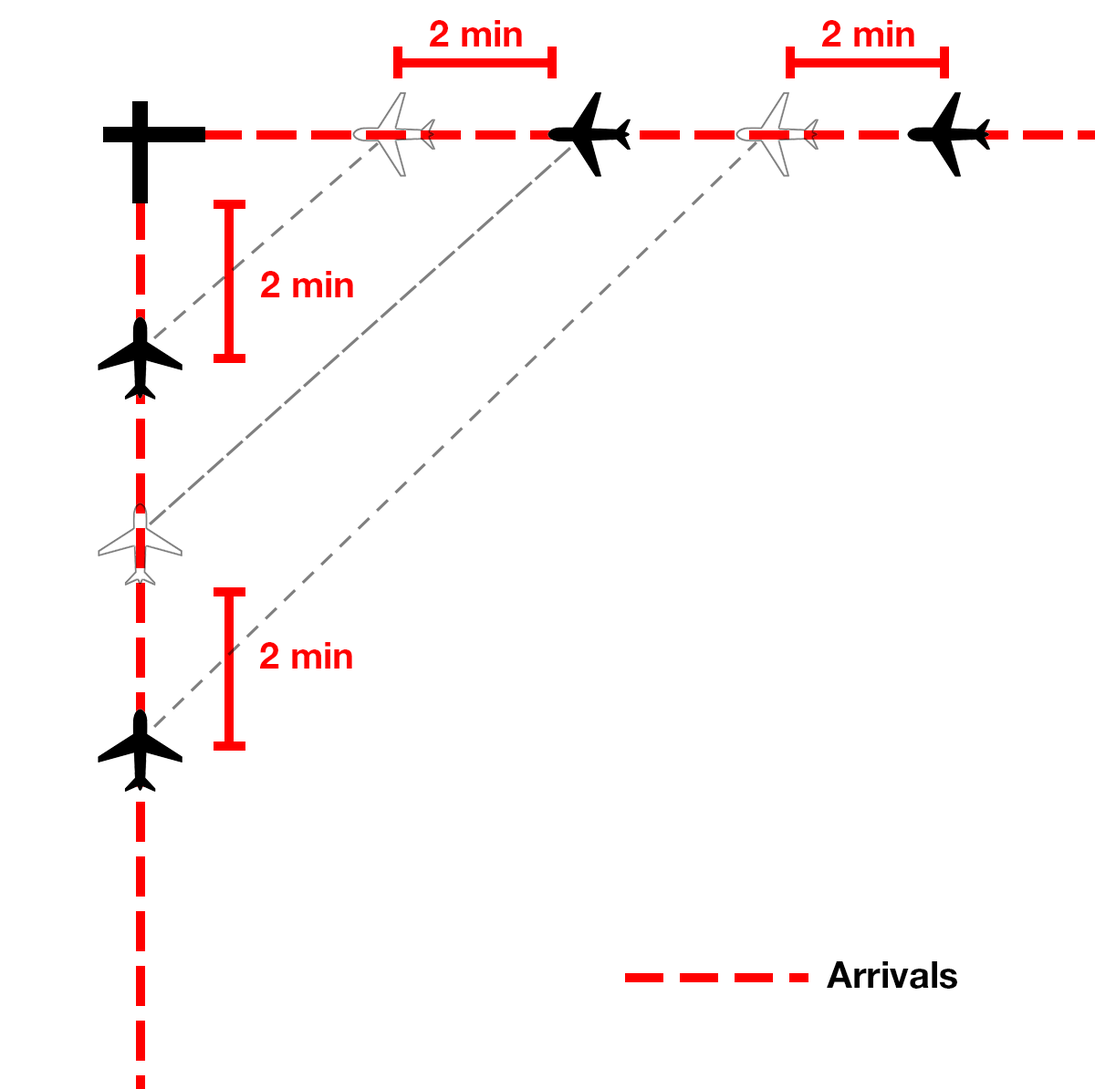
<style>
.page{position:relative;width:1095px;height:1089px;background:#ffffff}
.page>*{position:absolute;margin:0}
.t1{font:36.5px "HelveticaNeueLTStd-Bd";color:#ff0000}
.t2{font:36.5px "HelveticaNeueLTStd-Bd";color:#000000}
</style>
<div class="page">
<p class="t1" style="left:430px;top:20px;width:92px;height:27px">2 min</p>
<p class="t1" style="left:822px;top:20px;width:92px;height:27px">2 min</p>
<p class="t1" style="left:261px;top:271px;width:92px;height:26px">2 min</p>
<p class="t1" style="left:260px;top:642px;width:92px;height:27px">2 min</p>
<p class="t2" style="left:827px;top:962px;width:130px;height:27px">Arrivals</p>
</div>
